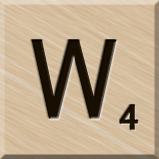
<style>
.page{position:relative;width:159px;height:159px}
.page>*{position:absolute;margin:0}
.t1{font:116px "MS-UIGothic";color:#180e01}
.t2{font:36px "MS-UIGothic";color:#1c1101;font-weight:bold;scale:1.1 1}
</style>
<div class="page">
<p class="t1" style="left:31px;top:40px;width:86px;height:79px">W</p>
<p class="t2" style="left:119px;top:104px;width:20px;height:27px">4</p>
</div>
